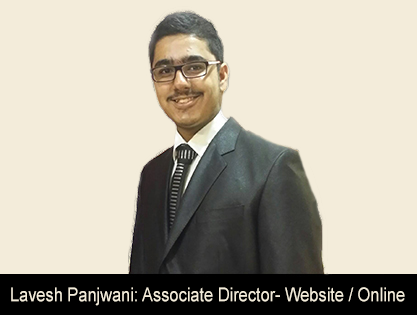
<style>
.page{position:relative;width:417px;height:315px;background:#f3ecda}
.page>*{position:absolute;margin:0}
.t1{font:19.2px "ArialMT";color:#f3ecda;scale:0.86 1}
</style>
<div class="page">
<p class="t1" style="left:11px;top:287px;width:394px;height:19px">Lavesh Panjwani: Associate Director- Website / Online</p>
</div>
